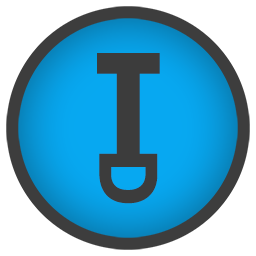
<style>
.page{position:relative;width:256px;height:256px;background:#ffffff}
.page>*{position:absolute;margin:0}
.t1{font:140px "AAvanteBsExtraBold";color:#3c3c3c}
.t2{font:80.3px "AAvanteBsExtraBold";color:#3c3c3c}
</style>
<div class="page">
<p class="t1" style="left:97px;top:53px;width:63px;height:102px">T</p>
<p class="t2" style="left:99px;top:153px;width:59px;height:51px;rotate:90deg">D</p>
</div>
